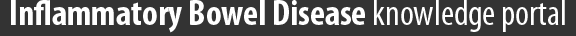
<style>
.page{position:relative;width:576px;height:36px;background:#333333}
.page>*{position:absolute;margin:0}
.t1{font:36px "MyriadPro-BoldCond";color:#ffffff}
.t2{font:36px "MyriadPro-Cond";color:#ffffff}
</style>
<div class="page">
<p class="t1" style="left:11px;top:0px;width:554px;height:33px">Inflammatory Bowel Disease<span class="t2"> knowledge portal</span></p>
</div>
